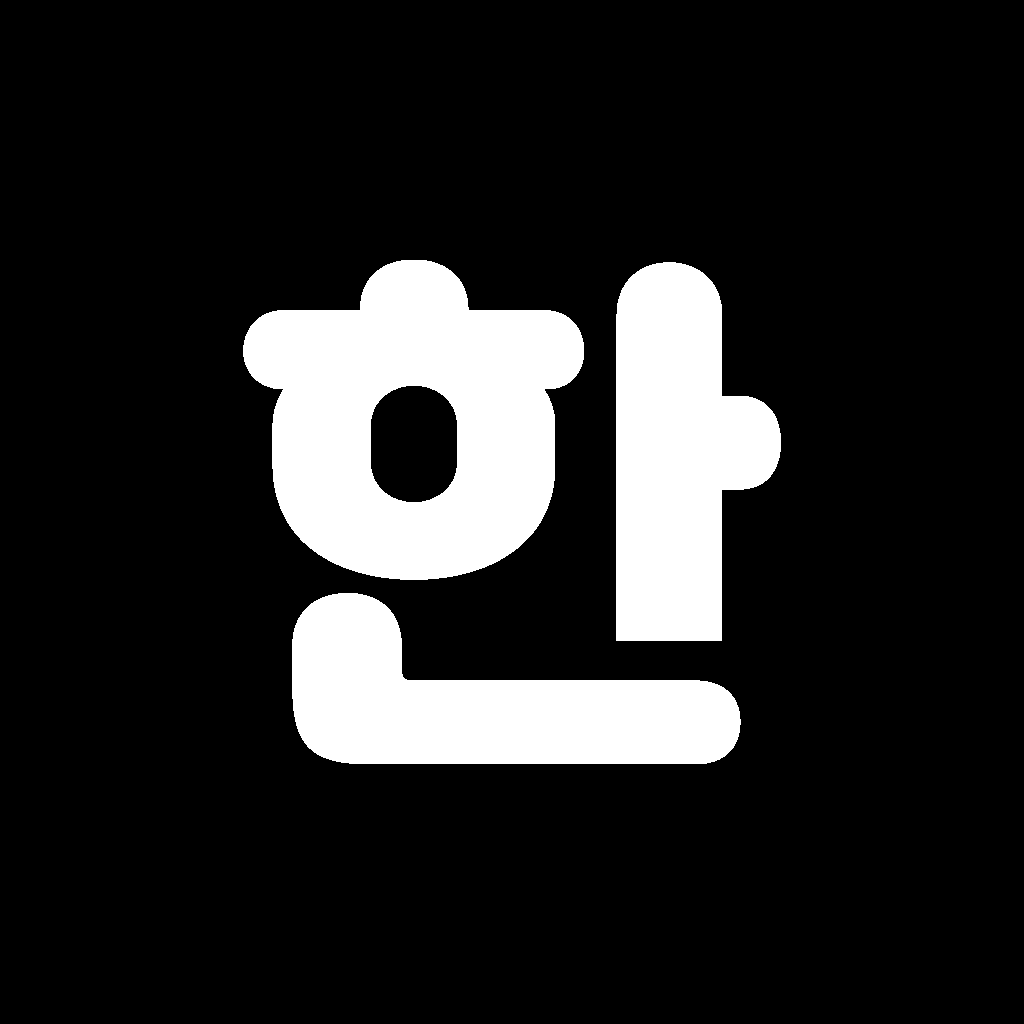
<style>
.page{position:relative;width:1024px;height:1024px;background:#000000}
.page>*{position:absolute;margin:0}
.t1{font:533.4px "JalnanOTF";color:#ffffff;font-weight:bold}
</style>
<div class="page">
<p class="t1" style="left:243px;top:260px;width:538px;height:504px">한</p>
</div>
